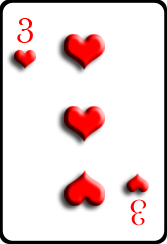
<style>
.page{position:relative;width:167px;height:244px;background:#ffffff}
.page>*{position:absolute;margin:0}
.t1{font:37px "BaskOldFace";color:#ff0000}
</style>
<div class="page">
<p class="t1" style="left:17px;top:18px;width:16px;height:25px">3</p>
<p class="t1" style="left:130px;top:199px;width:16px;height:27px;rotate:-180deg">3</p>
</div>
